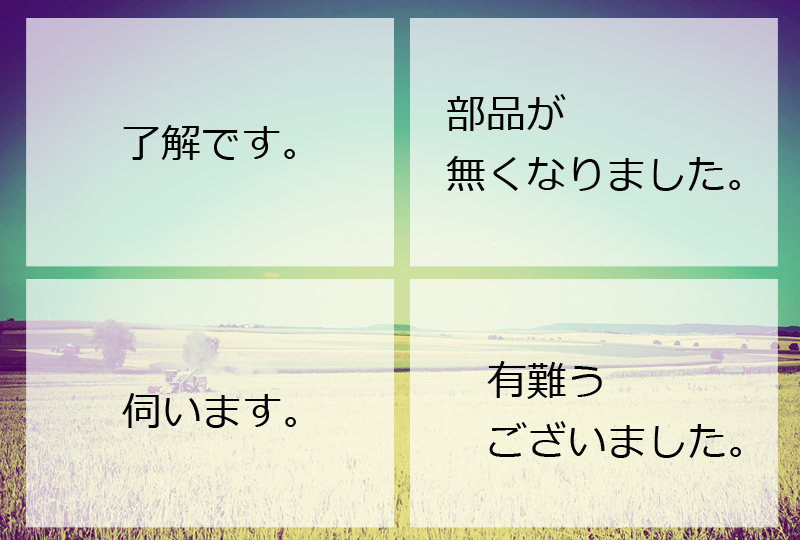
<style>
.page{position:relative;width:800px;height:540px}
.page>*{position:absolute;margin:0}
.t1{font:40px/60px "Meiryo";color:#000000}
.t2{font:40px "Meiryo";color:#000000}
</style>
<div class="page">
<p class="t1" style="left:446px;top:94px;width:294px;height:97px">部品が<br>無くなりました。</p>
<p class="t2" style="left:123px;top:125px;width:172px;height:35px">了解です。</p>
<p class="t1" style="left:487px;top:361px;width:254px;height:97px">有難う<br>ございました。</p>
<p class="t2" style="left:122px;top:393px;width:174px;height:35px">伺います。</p>
</div>
